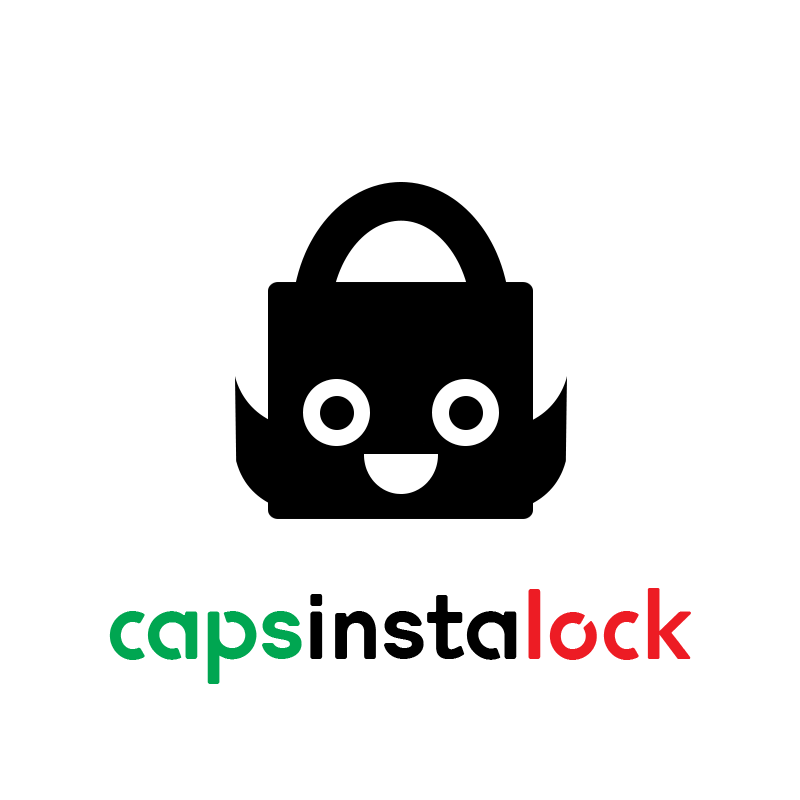
<style>
.page{position:relative;width:800px;height:800px;background:#ffffff}
.page>*{position:absolute;margin:0}
.t1{font:100px "Enso";color:#000000}
.t2{font:100px "Enso";color:#00a651}
.t3{font:100px "Enso";color:#ed1c24}
</style>
<div class="page">
<p class="t1" style="left:109px;top:588px;width:582px;height:96px"><span class="t2">caps</span>insta<span class="t3">lock</span></p>
</div>
